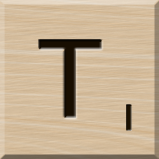
<style>
.page{position:relative;width:159px;height:159px}
.page>*{position:absolute;margin:0}
.t1{font:116px "MS-UIGothic";color:#180e01}
.t2{font:36px "GillSansMT";color:#1c1101;font-weight:bold;scale:1.1 1}
</style>
<div class="page">
<p class="t1" style="left:39px;top:40px;width:63px;height:78px">T</p>
<p class="t2" style="left:126px;top:104px;width:6px;height:27px">1</p>
</div>
